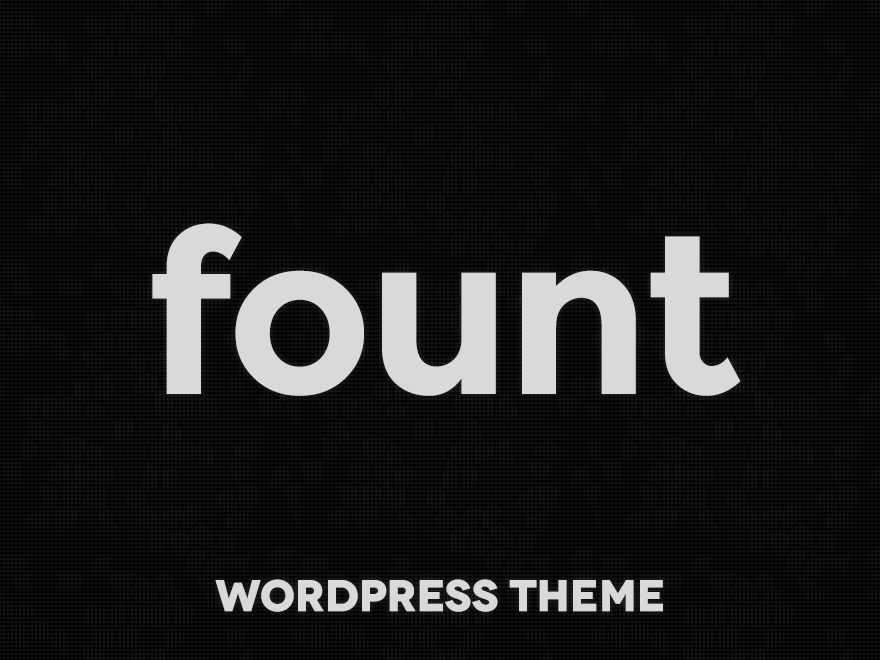
<style>
.page{position:relative;width:880px;height:660px;background:#000000}
.page>*{position:absolute;margin:0}
.t1{font:224.6px "Montserrat-Bold";letter-spacing:-0.025em;color:#d9d9d9}
.t2{font:44px "Novecentowide-Bold";letter-spacing:-0.026em;color:#d9d9d9;font-weight:bold}
</style>
<div class="page">
<p class="t1" style="left:152px;top:223px;width:589px;height:173px">fount</p>
<p class="t2" style="left:215px;top:579px;width:448px;height:33px">WORDPRESS Theme</p>
</div>
